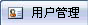
<style>
.page{position:relative;width:88px;height:25px}
.page>*{position:absolute;margin:0}
.t1{font:12px "SimSun";color:#000103}
</style>
<div class="page">
<p class="t1" style="left:32px;top:7px;width:47px;height:11px">用户管理</p>
</div>
